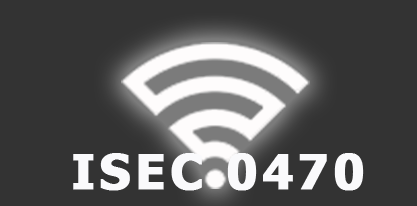
<style>
.page{position:relative;width:417px;height:206px;background:#333333}
.page>*{position:absolute;margin:0}
.t1{font:48px "Tahoma-Bold";letter-spacing:0.08em;color:#fafafc;font-weight:bold}
</style>
<div class="page">
<p class="t1" style="left:73px;top:153px;width:291px;height:38px">ISEC 0470</p>
</div>
